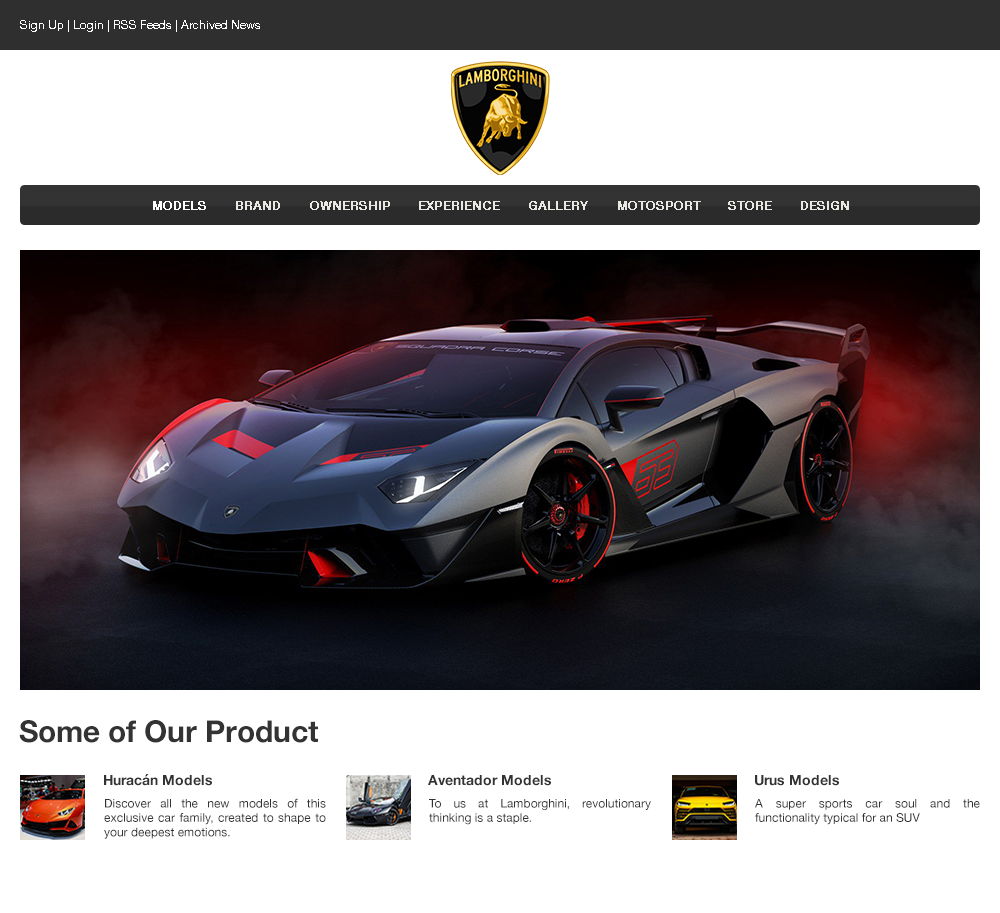
<style>
.page{position:relative;width:1000px;height:913px;background:#ffffff}
.page>*{position:absolute;margin:0}
.t1{font:12px "HelveticaNeue";color:#ffffff}
.t2{font:12px "HelveticaNeue";color:#ffffff;font-weight:bold}
.t3{font:12px "HelveticaNeue";color:#e9e8e3;font-weight:bold}
.t4{font:30px "HelveticaNeue-Bold";color:#333333}
.t5{font:14px "HelveticaNeue-Bold";color:#333333}
.t6{font:12px "HelveticaNeue";color:#333333}
</style>
<div class="page">
<p class="t1" style="left:20px;top:20px;width:240px;height:12px">Sign Up | Login | RSS Feeds | Archived News</p>
<p class="t2" style="left:153px;top:201px;width:53px;height:9px">MODELS</p>
<p class="t3" style="left:236px;top:201px;width:44px;height:9px">BRAND</p>
<p class="t3" style="left:310px;top:201px;width:80px;height:9px">OWNERSHIP</p>
<p class="t3" style="left:419px;top:201px;width:81px;height:9px">EXPERIENCE</p>
<p class="t3" style="left:529px;top:201px;width:59px;height:9px">GALLERY</p>
<p class="t3" style="left:618px;top:201px;width:83px;height:9px">MOTOSPORT</p>
<p class="t3" style="left:728px;top:201px;width:44px;height:9px">STORE</p>
<p class="t3" style="left:801px;top:201px;width:48px;height:9px">DESIGN</p>
<p class="t4" style="left:19px;top:720px;width:299px;height:23px">Some of Our Product</p>
<p class="t5" style="left:104px;top:774px;width:108px;height:12px">Huracán Models</p>
<p class="t5" style="left:428px;top:775px;width:123px;height:11px">Aventador Models</p>
<p class="t5" style="left:755px;top:775px;width:84px;height:11px">Urus Models</p>
<p class="t6" style="left:104px;top:798px;width:222px;height:41px;text-align:justify">Discover all the new models of this exclusive car family, created to shape to your deepest emotions.</p>
<p class="t6" style="left:429px;top:799px;width:222px;height:26px;text-align:justify">To us at Lamborghini, revolutionary thinking is a staple.</p>
<p class="t6" style="left:755px;top:799px;width:225px;height:26px;text-align:justify">A super sports car soul and the functionality typical for an SUV</p>
</div>
